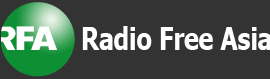
<style>
.page{position:relative;width:270px;height:79px;background:#333333}
.page>*{position:absolute;margin:0}
.t1{font:31.2px "Tahoma-Bold";color:#ffffff;scale:0.79 1}
</style>
<div class="page">
<p class="t1" style="left:82px;top:26px;width:189px;height:24px">Radio Free Asia</p>
</div>
